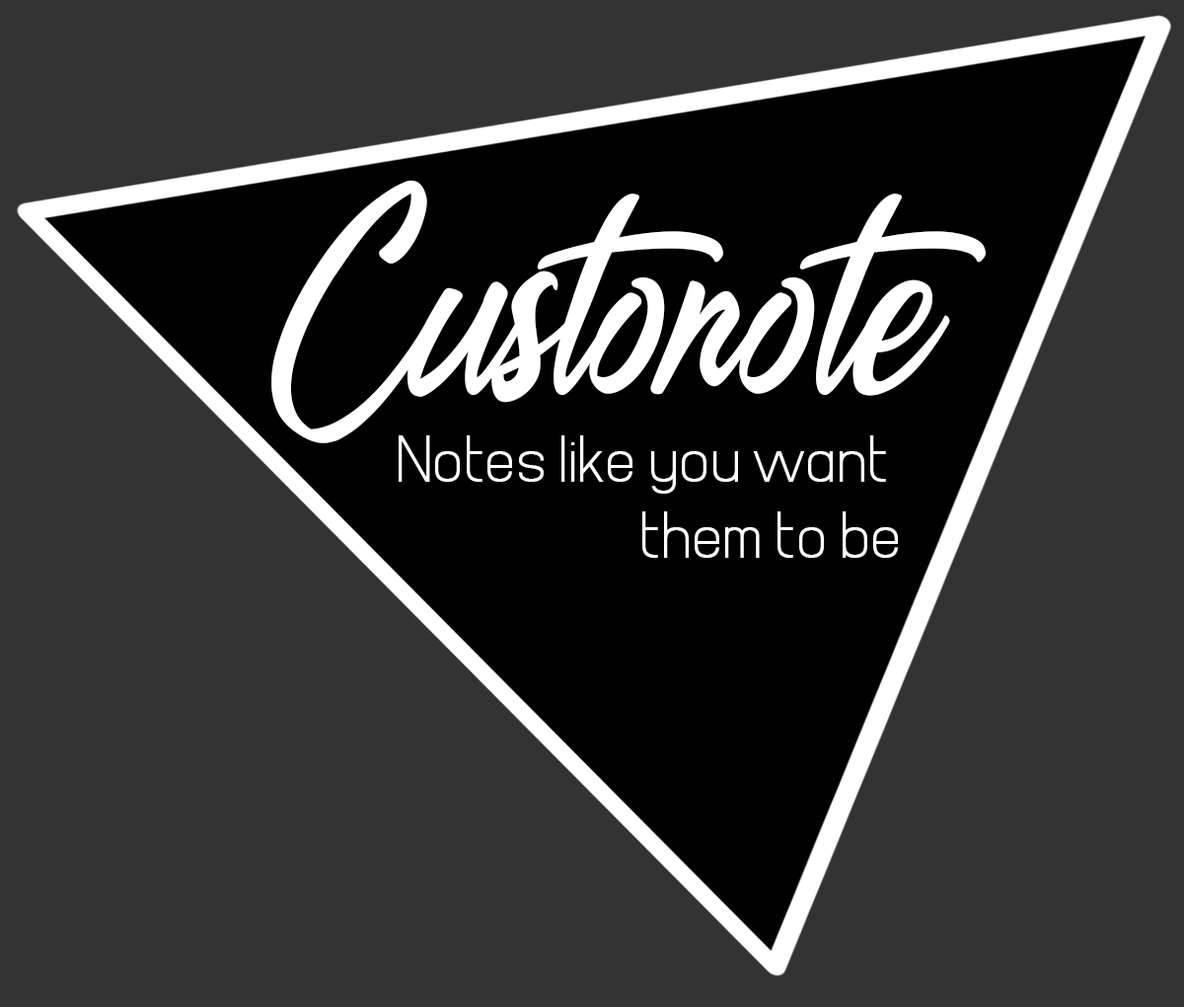
<style>
.page{position:relative;width:1184px;height:1007px;background:#333333}
.page>*{position:absolute;margin:0}
.t1{font:263.2px "GenerationSeptember";color:#ffffff}
.t2{font:63.2px "Supermarketed";color:#ffffff}
</style>
<div class="page">
<p class="t1" style="left:271px;top:180px;width:715px;height:263px">Custonote</p>
<p class="t2" style="left:399px;top:435px;width:499px;height:123px;text-align:right">Notes like you want <br>them to be</p>
</div>
